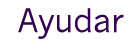
<style>
.page{position:relative;width:140px;height:50px;background:#ffffff}
.page>*{position:absolute;margin:0}
.t1{font:32px "NewsGothicMT";color:#340251}
</style>
<div class="page">
<p class="t1" style="left:18px;top:8px;width:106px;height:31px">Ayudar</p>
</div>
